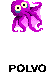
<style>
.page{position:relative;width:55px;height:72px;background:#ffffff}
.page>*{position:absolute;margin:0}
.t1{font:10.3px "Arial-BoldMT";color:#000000;scale:1.11 1}
</style>
<div class="page">
<p class="t1" style="left:9px;top:64px;width:38px;height:9px">POLVO</p>
</div>
